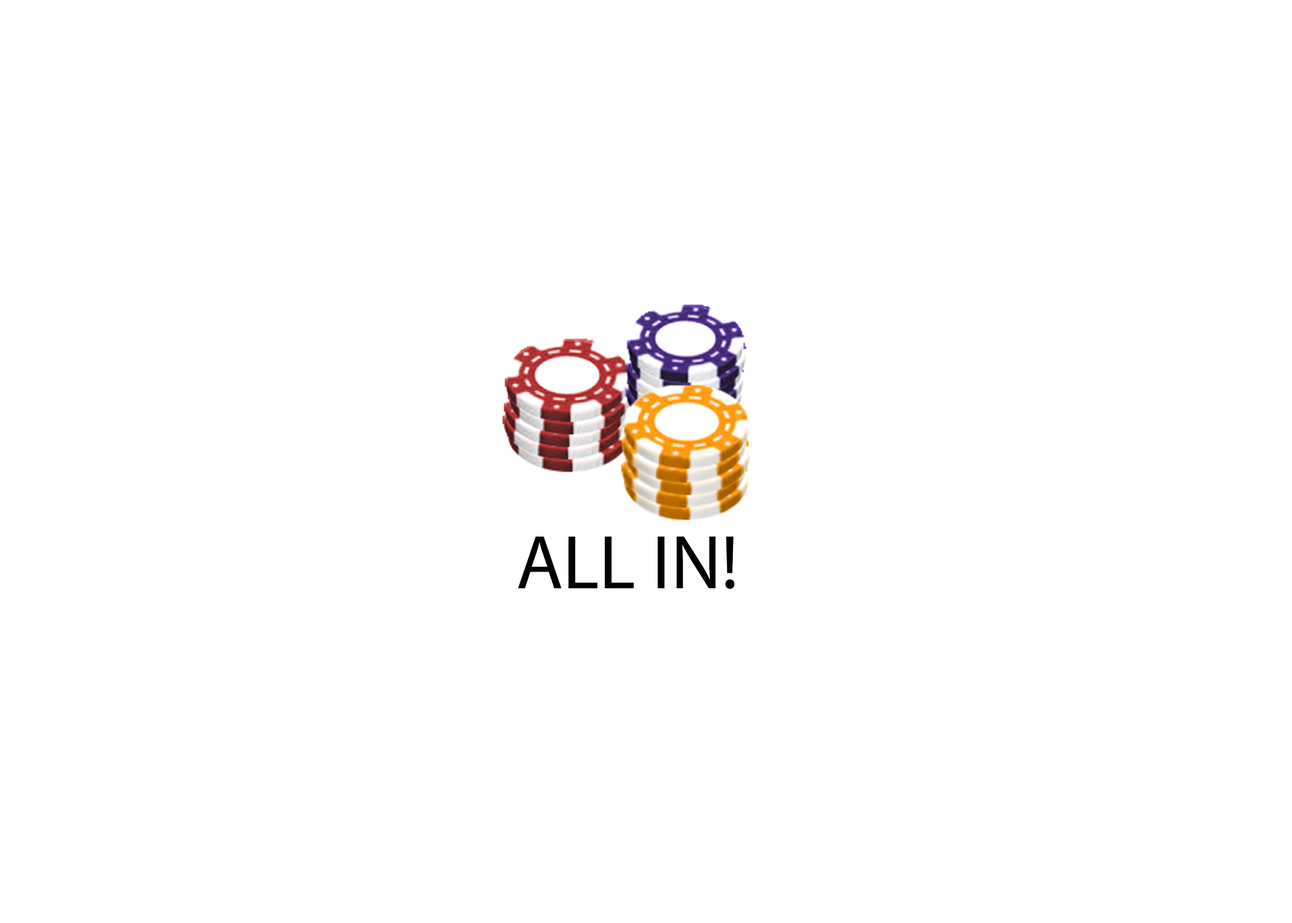
<style>
.page{position:relative;width:1292px;height:923px;background:#ffffff}
.page>*{position:absolute;margin:0}
.t1{font:76.9px "MyriadPro-Regular";color:#000000}
</style>
<div class="page">
<p class="t1" style="left:518px;top:536px;width:217px;height:53px">ALL IN!</p>
</div>
